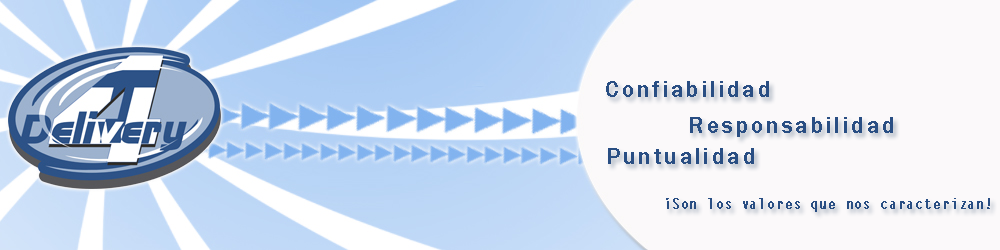
<style>
.page{position:relative;width:1000px;height:250px;background:#fbf9fa}
.page>*{position:absolute;margin:0}
.t1{font:24px "FranklinGothic-Medium";letter-spacing:0.1em;color:#294e83}
.t2{font:14px "LetterGothicStd";letter-spacing:0.075em;color:#294e83;font-weight:bold;scale:0.8 1}
</style>
<div class="page">
<p class="t1" style="left:606px;top:81px;width:163px;height:16px">Confiabilidad</p>
<p class="t1" style="left:690px;top:117px;width:203px;height:20px">Responsabilidad</p>
<p class="t1" style="left:608px;top:148px;width:146px;height:16px">Puntualidad</p>
<p class="t2" style="left:666px;top:198px;width:324px;height:14px">¡Son los valores que nos caracterizan!</p>
</div>
